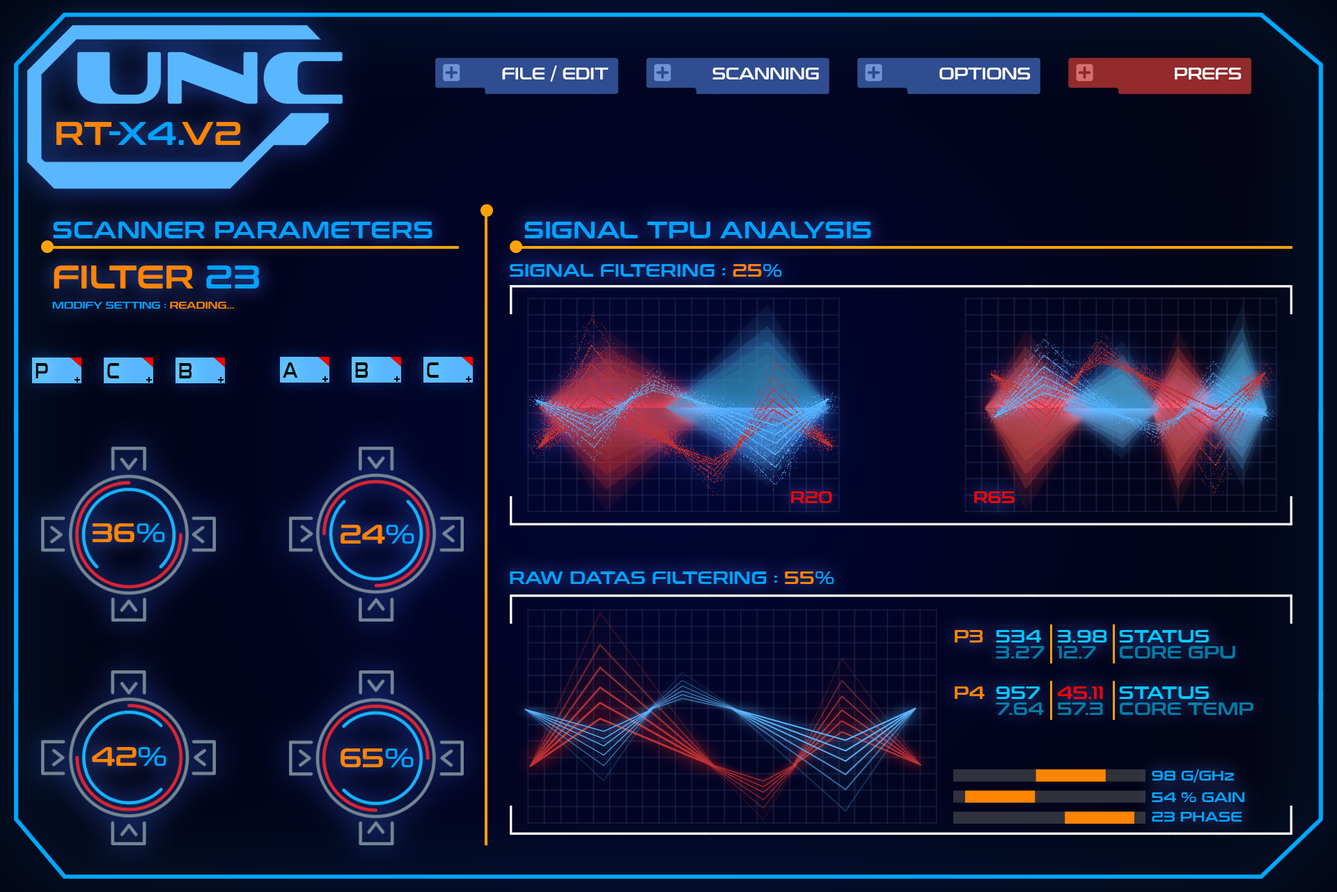
<style>
.page{position:relative;width:1337px;height:892px}
.page>*{position:absolute;margin:0}
.t1{font:15.8px "ConthraxSb-Regular";color:#fffffe}
.t2{font:32.7px "ConthraxSb-Regular";color:#00a2ff}
.t3{font:32.7px "ConthraxSb-Regular";color:#ff8400}
.t4{font:24px "ConthraxSb-Regular";color:#00a2ff}
.t5{font:17.7px "ConthraxSb-Regular";color:#00a2ff}
.t6{font:17.7px "ConthraxSb-Regular";color:#ff8400}
.t7{font:9.8px "ConthraxSb-Regular";color:#00a2ff}
.t8{font:9.8px "ConthraxSb-Regular";color:#ff8400}
.t9{font:21.3px "ConthraxSb-Regular";color:#010100;scale:0.72 1}
.t10{font:15.8px "ConthraxSb-Regular";color:#ff0000}
.t11{font:26.2px "ConthraxSb-Regular";color:#ff8400}
.t12{font:26.2px "ConthraxSb-Regular";color:#00a2ff}
.t13{font:17.7px "ConthraxSb-Regular";color:#00c6ff}
.t14{font:17.7px "ConthraxSb-Regular";color:#027ca6}
.t15{font:17.7px "ConthraxSb-Regular";color:#027ca4}
.t16{font:17.7px "ConthraxSb-Regular";color:#ff0000}
.t17{font:17.7px "ConthraxSb-Regular";color:#027ca5}
.t18{font:17.7px "ConthraxSb-Regular";color:#027ba3}
.t19{font:14px "ConthraxSb-Regular";color:#00a2ff}
</style>
<div class="page">
<p class="t1" style="left:502px;top:65px;width:107px;height:16px">FILE / EDIT</p>
<p class="t1" style="left:713px;top:68px;width:106px;height:11px">SCANNING</p>
<p class="t1" style="left:940px;top:68px;width:91px;height:11px">OPTIONS</p>
<p class="t1" style="left:1175px;top:68px;width:67px;height:11px">PREFS</p>
<p class="t2" style="left:56px;top:122px;width:185px;height:23px"><span class="t3">RT</span>-X4.<span class="t3">V2</span></p>
<p class="t4" style="left:53px;top:222px;width:380px;height:16px">SCANNER PARAMETERS</p>
<p class="t4" style="left:525px;top:222px;width:346px;height:16px">SIGNAL TPU ANALYSIS</p>
<p class="t3" style="left:54px;top:265px;width:205px;height:23px">FILTER<span class="t2"> 23</span></p>
<p class="t5" style="left:510px;top:264px;width:272px;height:13px">SIGNAL FILTERING : <span class="t6">25</span>%</p>
<p class="t7" style="left:52px;top:302px;width:182px;height:7px">MODIFY SETTING : <span class="t8">READING...</span></p>
<p class="t9" style="left:36px;top:363px;width:12px;height:15px">P</p>
<p class="t9" style="left:107px;top:363px;width:12px;height:15px">C</p>
<p class="t9" style="left:179px;top:363px;width:13px;height:15px">B</p>
<p class="t9" style="left:283px;top:362px;width:15px;height:16px">A</p>
<p class="t9" style="left:355px;top:362px;width:13px;height:16px">B</p>
<p class="t9" style="left:427px;top:362px;width:12px;height:16px">C</p>
<p class="t10" style="left:791px;top:491px;width:41px;height:12px">R20</p>
<p class="t10" style="left:974px;top:491px;width:41px;height:12px">R65</p>
<p class="t11" style="left:92px;top:523px;width:73px;height:19px">36<span class="t12">%</span></p>
<p class="t11" style="left:341px;top:525px;width:73px;height:18px">24<span class="t12">%</span></p>
<p class="t5" style="left:510px;top:571px;width:324px;height:13px">RAW DATAS FILTERING : <span class="t6">55</span>%</p>
<p class="t6" style="left:955px;top:630px;width:29px;height:12px">P3</p>
<p class="t13" style="left:996px;top:630px;width:45px;height:12px">534</p>
<p class="t13" style="left:1058px;top:630px;width:50px;height:12px">3.98</p>
<p class="t13" style="left:1119px;top:630px;width:90px;height:12px">STATUS</p>
<p class="t14" style="left:996px;top:646px;width:49px;height:12px">3.27</p>
<p class="t14" style="left:1057px;top:646px;width:39px;height:12px">12.7</p>
<p class="t15" style="left:1120px;top:646px;width:116px;height:12px">CORE GPU</p>
<p class="t6" style="left:955px;top:686px;width:30px;height:13px">P4</p>
<p class="t13" style="left:996px;top:686px;width:44px;height:13px">957</p>
<p class="t16" style="left:1057px;top:686px;width:46px;height:13px">45.11</p>
<p class="t13" style="left:1119px;top:686px;width:90px;height:13px">STATUS</p>
<p class="t17" style="left:996px;top:702px;width:48px;height:13px">7.64</p>
<p class="t17" style="left:1058px;top:702px;width:45px;height:13px">57.3</p>
<p class="t18" style="left:1120px;top:702px;width:134px;height:13px">CORE TEMP</p>
<p class="t11" style="left:92px;top:747px;width:74px;height:19px">42<span class="t12">%</span></p>
<p class="t11" style="left:341px;top:748px;width:73px;height:19px">65<span class="t12">%</span></p>
<p class="t19" style="left:1152px;top:769px;width:82px;height:13px">98 G/GHz</p>
<p class="t19" style="left:1152px;top:792px;width:93px;height:10px">54 % GAIN</p>
<p class="t19" style="left:1152px;top:811px;width:90px;height:10px">23 PHASE</p>
</div>
